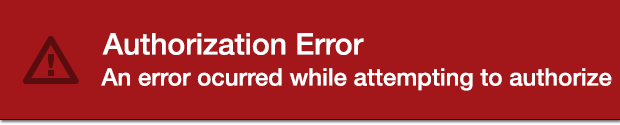
<style>
.page{position:relative;width:620px;height:125px;background:#a3171b}
.page>*{position:absolute;margin:0}
.t1{font:30px "HelveticaNeue-Medium";color:#ffffff}
.t2{font:24px "HelveticaNeue-Medium";color:#ffffff}
</style>
<div class="page">
<p class="t1" style="left:102px;top:33px;width:262px;height:22px">Authorization Error</p>
<p class="t2" style="left:101px;top:68px;width:511px;height:23px">An error ocurred while attempting to authorize</p>
</div>
